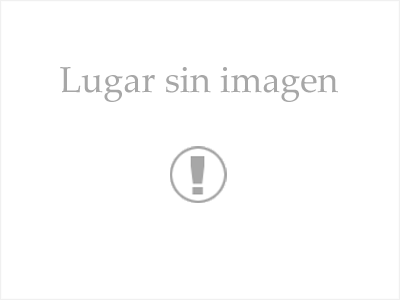
<style>
.page{position:relative;width:400px;height:300px;background:#ffffff}
.page>*{position:absolute;margin:0}
.t1{font:36px "PalatinoLinotype-Roman";color:#a7a7a7}
</style>
<div class="page">
<p class="t1" style="left:60px;top:67px;width:278px;height:35px">Lugar sin imagen</p>
</div>
